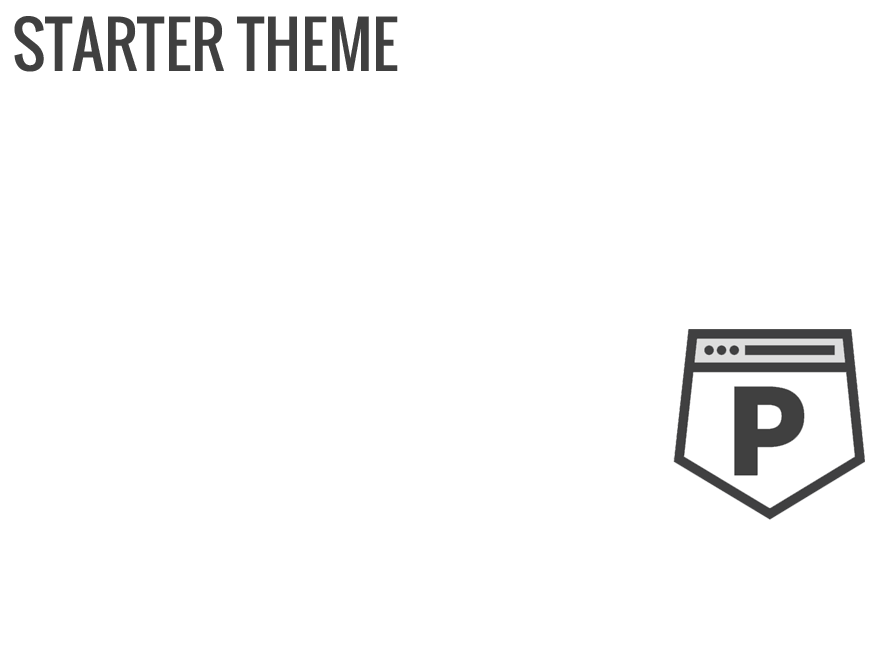
<style>
.page{position:relative;width:880px;height:660px;background:#ffffff}
.page>*{position:absolute;margin:0}
.t1{font:62.3px "Oswald-Regular";color:#404040}
</style>
<div class="page">
<p class="t1" style="left:14px;top:16px;width:384px;height:56px">STARTER THEME</p>
</div>
